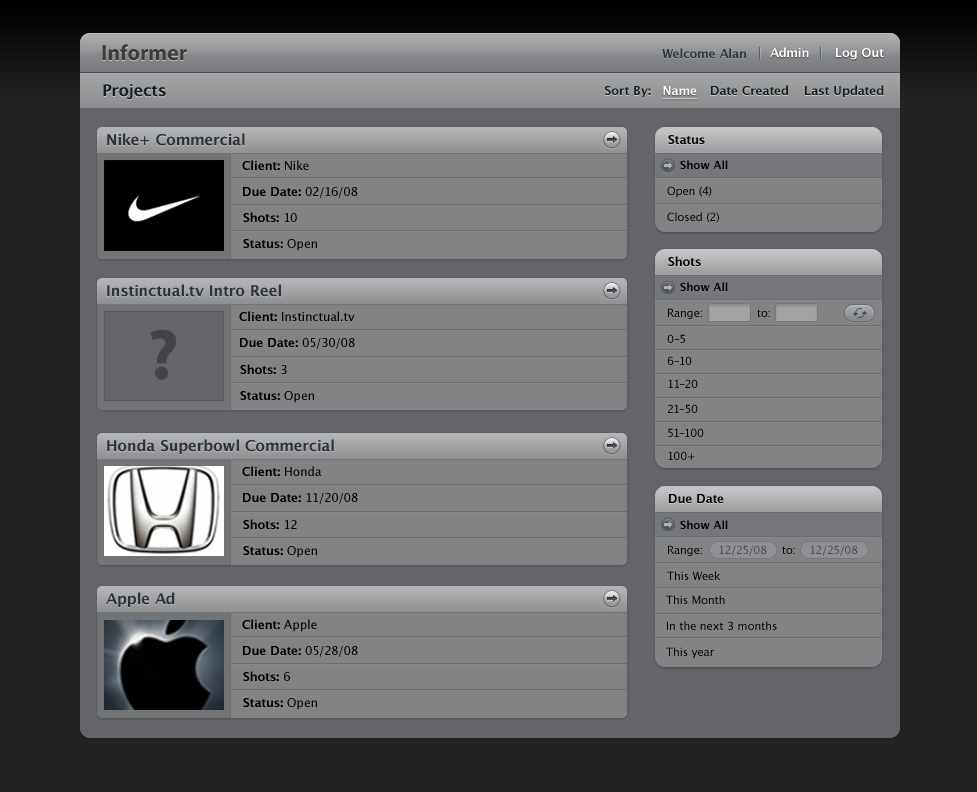
<style>
.page{position:relative;width:977px;height:792px;background:#818385}
.page>*{position:absolute;margin:0}
.t1{font:22px "MyriadPro-Bold";color:#3c3c3c}
.t2{font:12px "LucidaGrande-Bold";color:#303643}
.t3{font:12px "LucidaGrande-Bold";color:#ffffff}
.t4{font:16px "LucidaGrande-Bold";color:#191d20}
.t5{font:12px "LucidaGrande-Bold";color:#191d20}
.t6{font:12px "LucidaGrande-Bold";color:#ffffff;text-decoration:underline}
.t7{font:15px "LucidaGrande-Bold";color:#2f3337}
.t8{font:12px "LucidaGrande-Bold";color:#000000}
.t9{font:12px "LucidaGrande";color:#000000}
.t10{font:11px "LucidaGrande-Bold";color:#020202}
.t11{font:11px "LucidaGrande";color:#000000}
.t12{font:72px "MyriadPro-Bold";color:#424448}
.t13{font:11px "LucidaGrande";color:#474849}
</style>
<div class="page">
<p class="t1" style="left:102px;top:44px;width:85px;height:17px">Informer</p>
<p class="t2" style="left:662px;top:48px;width:84px;height:10px">Welcome Alan</p>
<p class="t3" style="left:770px;top:47px;width:39px;height:10px">Admin</p>
<p class="t3" style="left:836px;top:48px;width:48px;height:12px">Log Out</p>
<p class="t4" style="left:103px;top:84px;width:63px;height:16px">Projects</p>
<p class="t5" style="left:605px;top:86px;width:46px;height:12px">Sort By:</p>
<p class="t6" style="left:662px;top:86px;width:36px;height:13px">Name</p>
<p class="t5" style="left:711px;top:85px;width:77px;height:10px">Date Created</p>
<p class="t5" style="left:805px;top:85px;width:79px;height:13px">Last Updated</p>
<p class="t7" style="left:107px;top:133px;width:138px;height:13px">Nike+ Commercial</p>
<p class="t8" style="left:668px;top:135px;width:37px;height:9px">Status</p>
<p class="t8" style="left:242px;top:160px;width:67px;height:10px">Client: <span class="t9">Nike</span></p>
<p class="t10" style="left:680px;top:160px;width:48px;height:9px">Show All</p>
<p class="t8" style="left:243px;top:187px;width:115px;height:11px">Due Date: <span class="t9">02/16/08</span></p>
<p class="t11" style="left:667px;top:186px;width:45px;height:11px">Open (4)</p>
<p class="t8" style="left:243px;top:212px;width:54px;height:10px">Shots: <span class="t9">10</span></p>
<p class="t11" style="left:667px;top:212px;width:52px;height:11px">Closed (2)</p>
<p class="t8" style="left:243px;top:239px;width:74px;height:12px">Status: <span class="t9">Open</span></p>
<p class="t8" style="left:668px;top:256px;width:33px;height:10px">Shots</p>
<p class="t7" style="left:107px;top:284px;width:174px;height:13px">Instinctual.tv Intro Reel</p>
<p class="t10" style="left:680px;top:282px;width:48px;height:9px">Show All</p>
<p class="t9" style="left:239px;top:311px;width:116px;height:10px"><span class="t8">Client: </span>Instinctual.tv</p>
<p class="t11" style="left:668px;top:308px;width:34px;height:11px">Range:</p>
<p class="t11" style="left:757px;top:309px;width:13px;height:8px">to:</p>
<p class="t12" style="left:150px;top:329px;width:27px;height:51px">?</p>
<p class="t8" style="left:240px;top:338px;width:115px;height:11px">Due Date: <span class="t9">05/30/08</span></p>
<p class="t11" style="left:667px;top:334px;width:18px;height:9px">0–5</p>
<p class="t8" style="left:240px;top:364px;width:47px;height:10px">Shots: <span class="t9">3</span></p>
<p class="t11" style="left:667px;top:356px;width:25px;height:9px">6–10</p>
<p class="t11" style="left:668px;top:379px;width:30px;height:9px">11–20</p>
<p class="t8" style="left:240px;top:391px;width:74px;height:12px">Status: <span class="t9">Open</span></p>
<p class="t11" style="left:668px;top:404px;width:30px;height:9px">21–50</p>
<p class="t11" style="left:668px;top:428px;width:36px;height:9px">51–100</p>
<p class="t7" style="left:107px;top:439px;width:227px;height:15px">Honda Superbowl Commercial</p>
<p class="t11" style="left:668px;top:451px;width:27px;height:9px">100+</p>
<p class="t8" style="left:242px;top:466px;width:80px;height:10px">Client: <span class="t9">Honda</span></p>
<p class="t8" style="left:243px;top:493px;width:115px;height:11px">Due Date: <span class="t9">11/20/08</span></p>
<p class="t8" style="left:669px;top:494px;width:55px;height:9px">Due Date</p>
<p class="t8" style="left:243px;top:519px;width:54px;height:10px">Shots: <span class="t9">12</span></p>
<p class="t10" style="left:680px;top:520px;width:48px;height:9px">Show All</p>
<p class="t11" style="left:668px;top:545px;width:34px;height:11px">Range:</p>
<p class="t13" style="left:719px;top:545px;width:48px;height:11px">12/25/08</p>
<p class="t13" style="left:810px;top:545px;width:48px;height:11px">12/25/08</p>
<p class="t8" style="left:243px;top:546px;width:74px;height:12px">Status: <span class="t9">Open</span></p>
<p class="t11" style="left:782px;top:546px;width:13px;height:8px">to:</p>
<p class="t11" style="left:667px;top:571px;width:54px;height:9px">This Week</p>
<p class="t7" style="left:106px;top:592px;width:69px;height:15px">Apple Ad</p>
<p class="t11" style="left:666px;top:595px;width:59px;height:9px">This Month</p>
<p class="t8" style="left:242px;top:619px;width:75px;height:13px">Client: <span class="t9">Apple</span></p>
<p class="t11" style="left:667px;top:621px;width:110px;height:9px">In the next 3 months</p>
<p class="t8" style="left:243px;top:646px;width:115px;height:11px">Due Date: <span class="t9">05/28/08</span></p>
<p class="t11" style="left:666px;top:647px;width:48px;height:11px">This year</p>
<p class="t8" style="left:243px;top:671px;width:47px;height:10px">Shots: <span class="t9">6</span></p>
<p class="t8" style="left:243px;top:698px;width:74px;height:12px">Status: <span class="t9">Open</span></p>
</div>
